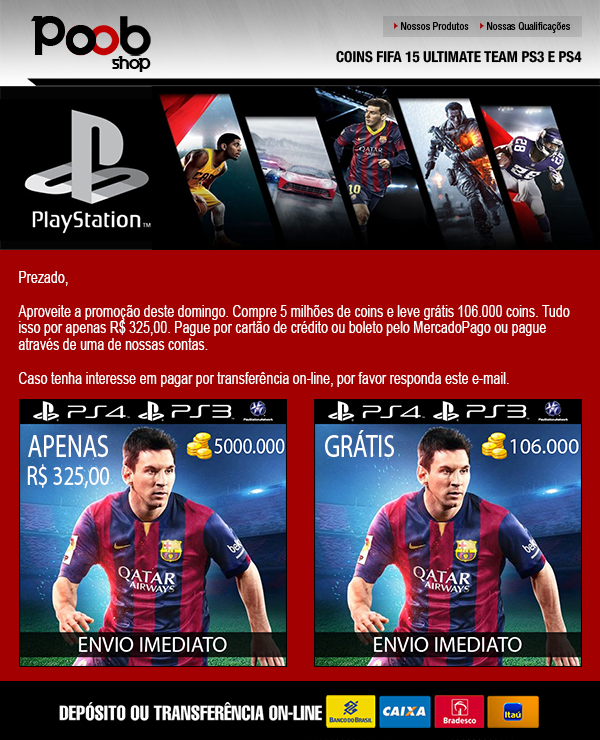
<style>
.page{position:relative;width:600px;height:740px;background:#a30001}
.page>*{position:absolute;margin:0}
.t1{font:43px "Velocity";color:#010101}
.t2{font:41px "Velocity";color:#010101}
.t3{font:43px "Velocity";color:#000000}
.t4{font:10px "HelveticaLTStd-Cond";color:#000000}
.t5{font:15px "HelveticaNeue-CondensedBold";color:#000000}
.t6{font:14.9px "Velocity";color:#000000}
.t7{font:16.8px "ArialMT";color:#ffffff;scale:0.74 1}
.t8{font:27.9px "MyriadPro-Regular";color:#ffffff;scale:0.74 1}
.t9{font:32.1px "MyriadPro-Regular";color:#ffffff;scale:0.74 1}
.t10{font:20px "HelveticaLTStd-Comp";color:#ffffff}
</style>
<div class="page">
<p class="t1" style="left:31px;top:16px;width:35px;height:39px">P</p>
<p class="t2" style="left:66px;top:26px;width:29px;height:29px">O</p>
<p class="t3" style="left:66px;top:25px;width:31px;height:30px">O</p>
<p class="t4" style="left:401px;top:22px;width:68px;height:8px">Nossos Produtos</p>
<p class="t4" style="left:487px;top:22px;width:83px;height:11px">Nossas Qualificações</p>
<p class="t5" style="left:336px;top:50px;width:246px;height:13px">COINS FIFA 15 ULTIMATE TEAM PS3 E PS4</p>
<p class="t6" style="left:111px;top:56px;width:40px;height:16px">shop</p>
<p class="t7" style="left:18px;top:271px;width:552px;height:116px">Prezado,<br><br>Aproveite a promoção deste domingo. Compre 5 milhões de coins e leve grátis 106.000 coins. Tudo<br>isso por apenas R$ 325,00. Pague por cartão de crédito ou boleto pelo MercadoPago ou pague<br>através de uma de nossas contas.<br><br>Caso tenha interesse em pagar por transferência on-line, por favor responda este e-mail.</p>
<p class="t8" style="left:27px;top:435px;width:83px;height:54px;text-align:center"><span class="t9">APENAS<br></span>R$ 325,00</p>
<p class="t9" style="left:325px;top:430px;width:69px;height:27px">GRÁTIS</p>
<p class="t10" style="left:59px;top:702px;width:263px;height:19px">DEPÓSITO OU TRANSFERÊNCIA ON-LINE</p>
</div>
